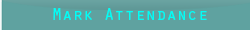
<style>
.page{position:relative;width:250px;height:30px;background:#5fa2a0}
.page>*{position:absolute;margin:0}
.t1{font:16.7px "OratorStd";color:#00fef6;scale:1.04 1}
</style>
<div class="page">
<p class="t1" style="left:53px;top:8px;width:154px;height:12px">Mark Attendance</p>
</div>
